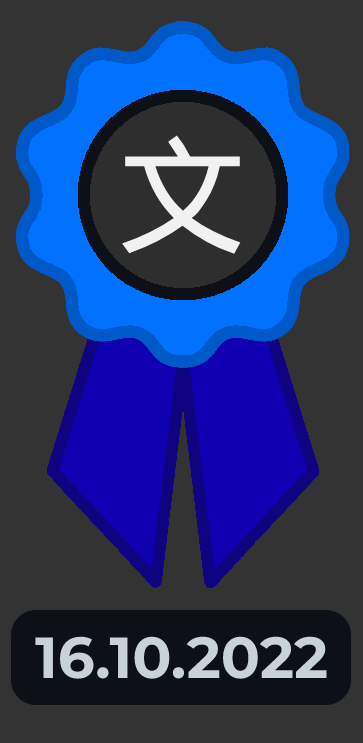
<style>
.page{position:relative;width:363px;height:743px;background:#333333}
.page>*{position:absolute;margin:0}
.t1{font:131px "DroidSansFallback";color:#f1f1f1}
.t2{font:58px "Montserrat-Bold";color:#c9d1d9}
</style>
<div class="page">
<p class="t1" style="left:122px;top:135px;width:119px;height:119px">文</p>
<p class="t2" style="left:35px;top:636px;width:292px;height:43px">16.10.2022</p>
</div>
